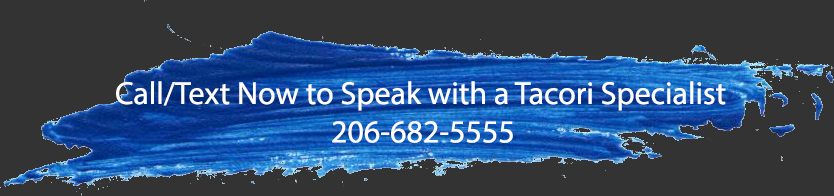
<style>
.page{position:relative;width:834px;height:196px;background:#333333}
.page>*{position:absolute;margin:0}
.t1{font:32px "MyriadPro-Regular";color:#ffffff}
</style>
<div class="page">
<p class="t1" style="left:116px;top:81px;width:610px;height:62px">Call/Text Now to Speak with a Tacori Specialist<br>      206-682-5555</p>
</div>
